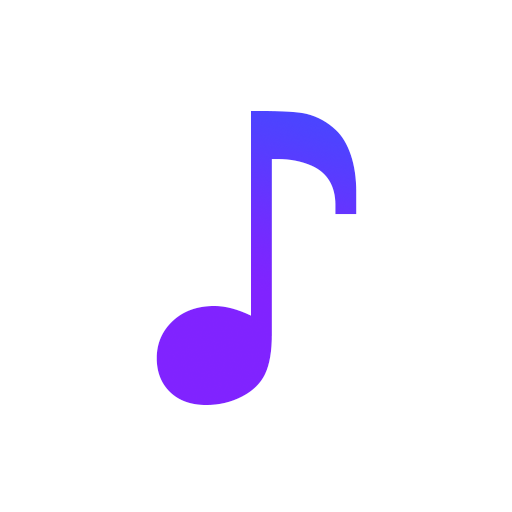
<style>
.page{position:relative;width:512px;height:512px;background:#ffffff}
.page>*{position:absolute;margin:0}
.t1{font:429.5px "TimesNewRomanPSMT"}
</style>
<div class="page">
<p class="t1" style="left:156px;top:111px;width:201px;height:294px">♪</p>
</div>
